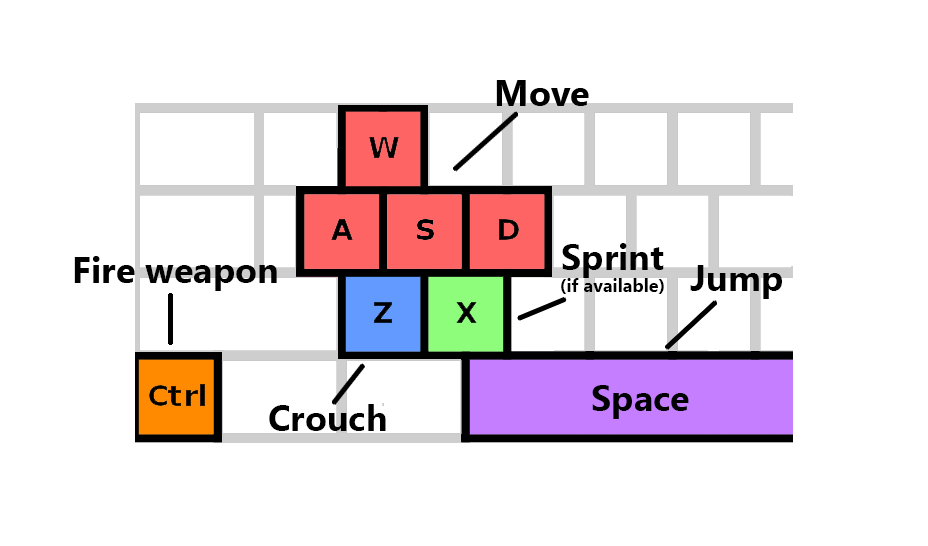
<style>
.page{position:relative;width:928px;height:546px;background:#ffffff}
.page>*{position:absolute;margin:0}
.t1{font:36px "MyanmarText-Bold";color:#000000}
.t2{font:18px "MyanmarText-Bold";color:#000000}
</style>
<div class="page">
<p class="t1" style="left:496px;top:80px;width:93px;height:26px">Move</p>
<p class="t2" style="left:561px;top:243px;width:103px;height:51px;text-align:center"><span class="t1">Sprint<br></span>(if available)</p>
<p class="t1" style="left:74px;top:256px;width:203px;height:35px">Fire weapon</p>
<p class="t1" style="left:690px;top:265px;width:92px;height:34px">Jump</p>
<p class="t1" style="left:592px;top:385px;width:97px;height:34px">Space</p>
<p class="t1" style="left:269px;top:404px;width:117px;height:27px">Crouch</p>
</div>
